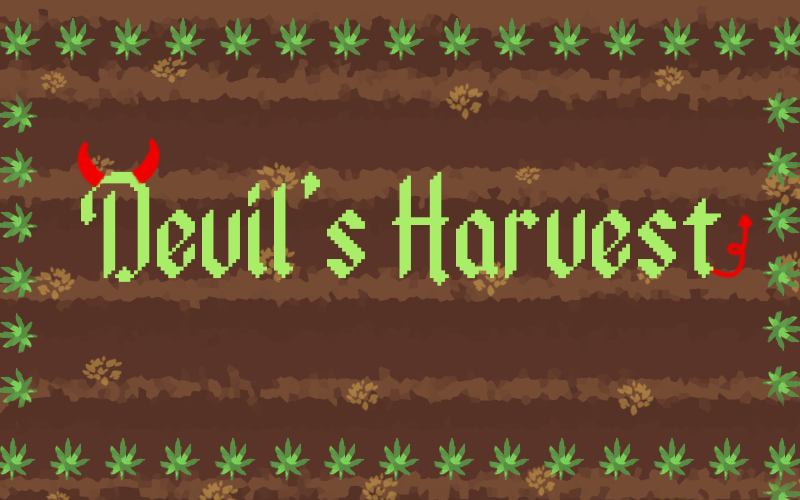
<style>
.page{position:relative;width:800px;height:500px;background:#5a3428}
.page>*{position:absolute;margin:0}
.t1{font:125px "Ancient-Modern-Tales";color:#a9ed69}
</style>
<div class="page">
<p class="t1" style="left:81px;top:171px;width:640px;height:115px">Devil’s Harvest</p>
</div>
